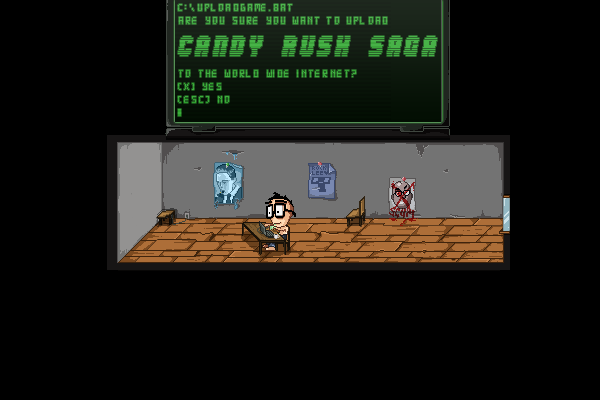
<style>
.page{position:relative;width:600px;height:400px;background:#000000}
.page>*{position:absolute;margin:0}
.t1{font:11px "Digital-7";letter-spacing:0.2em;color:#39ac39}
.t2{font:24.7px "Abduction2002";letter-spacing:0.1em;color:#39ac39}
</style>
<div class="page">
<p class="t1" style="left:178px;top:4px;width:209px;height:99px">C:\UploadGame.bat<br>ARE YOU SURE YOU WANT TO UPLOAD<br><br><br><br>TO THE WORLD WIDE INTERNET?<br>(X] YES <br>(ESC) NO</p>
<p class="t2" style="left:178px;top:36px;width:259px;height:20px">CANDY RUSH SAGA</p>
</div>
